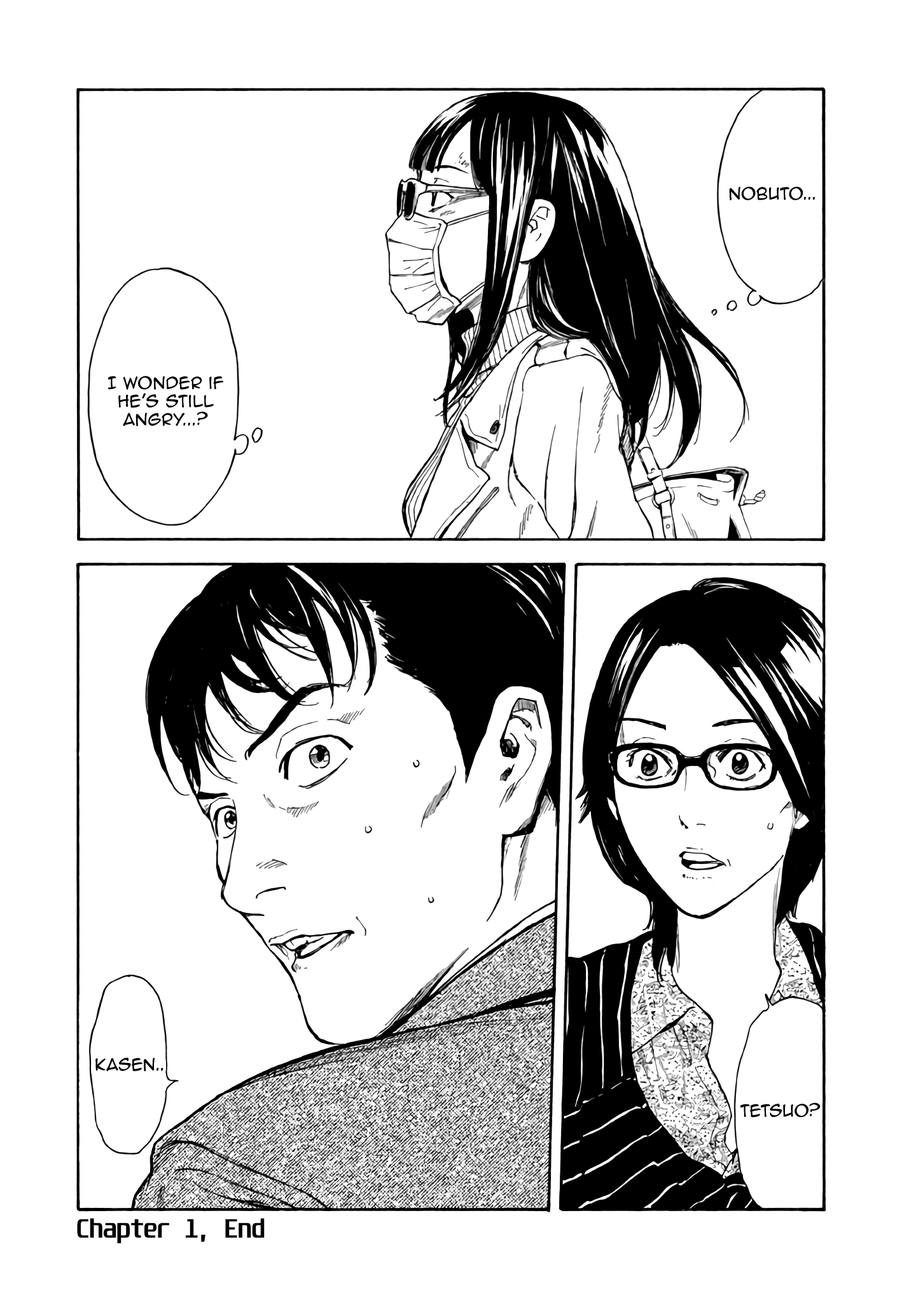
<style>
.page{position:relative;width:916px;height:1302px;background:#ffffff}
.page>*{position:absolute;margin:0}
.t1{font:15.3px "AnimeAce2.0BB";color:#000000}
.t2{font:22.9px "Unispace-Bold";color:#000000}
</style>
<div class="page">
<p class="t1" style="left:729px;top:186px;width:86px;height:14px">Nobuto...</p>
<p class="t1" style="left:108px;top:376px;width:116px;height:51px;text-align:center">I wonder if he’s still angry...?</p>
<p class="t1" style="left:95px;top:1057px;width:68px;height:14px">Kasen..</p>
<p class="t1" style="left:740px;top:1103px;width:80px;height:15px">Tetsuo?</p>
<p class="t2" style="left:77px;top:1218px;width:188px;height:26px">Chapter 1, End</p>
</div>
